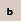
<style>
.page{position:relative;width:21px;height:21px;background:#d9cdc1}
.page>*{position:absolute;margin:0}
.t1{font:9px "Tahoma-Bold";color:#000000}
</style>
<div class="page">
<p class="t1" style="left:7px;top:8px;width:6px;height:7px">b</p>
</div>
